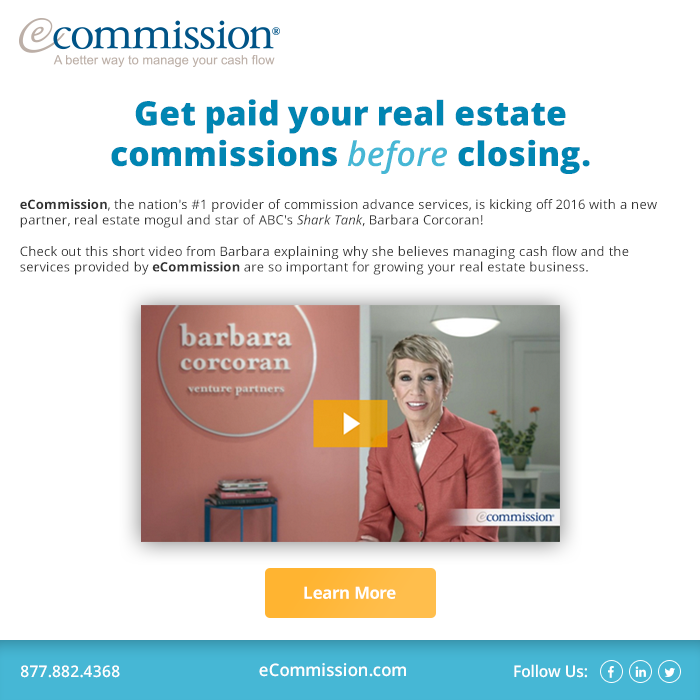
<style>
.page{position:relative;width:700px;height:700px;background:#ffffff}
.page>*{position:absolute;margin:0}
.t1{font:33.9px "OpenSans-Extrabold";color:#0085b2}
.t2{font:33.9px "OpenSans-SemiboldItalic";color:#46b7d5}
.t3{font:13.1px "OpenSans";color:#333333}
.t4{font:13.1px "OpenSans-Bold";color:#333333}
.t5{font:13.1px "OpenSans-Italic";color:#333333}
.t6{font:16.8px "OpenSans-Bold";color:#ffffff}
.t7{font:16px "OpenSans-Semibold";color:#ffffff;scale:0.96 1}
.t8{font:17.3px "OpenSans-Semibold";color:#ffffff;scale:0.96 1}
</style>
<div class="page">
<p class="t1" style="left:111px;top:99px;width:479px;height:75px;text-align:center">Get paid your real estate<br>commissions <span class="t2">before </span>closing.</p>
<p class="t3" style="left:20px;top:199px;width:637px;height:76px"><span class="t4">eCommission</span>, the nation's #1 provider of commission advance services, is kicking off 2016 with a new partner, real estate mogul and star of ABC's <span class="t5">Shark Tank</span>, Barbara Corcoran!<br><br>Check out this short video from Barbara explaining why she believes managing cash flow and the services provided by <span class="t4">eCommission</span> are so important for growing your real estate business.</p>
<p class="t6" style="left:304px;top:586px;width:92px;height:13px">Learn More</p>
<p class="t7" style="left:21px;top:665px;width:99px;height:13px">877.882.4368</p>
<p class="t8" style="left:259px;top:663px;width:147px;height:14px">eCommission.com</p>
<p class="t7" style="left:514px;top:664px;width:73px;height:14px">Follow Us:</p>
</div>
